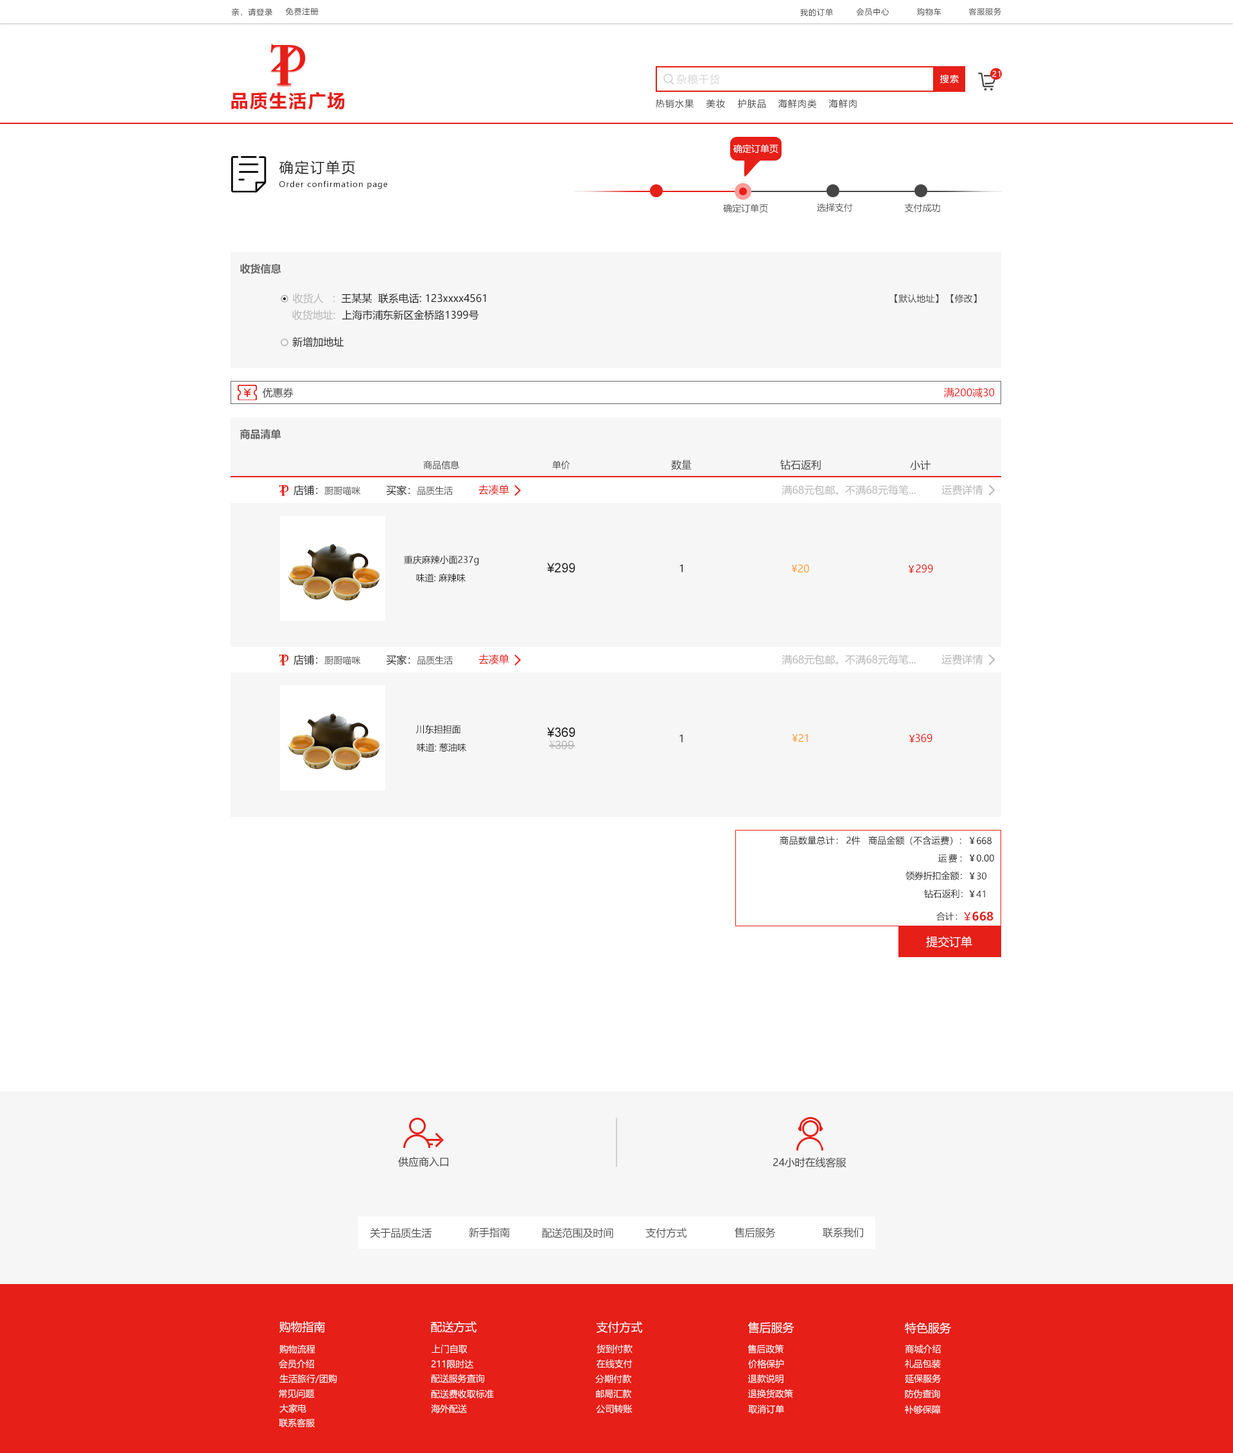
<style>
.page{position:relative;width:1233px;height:1453px;background:#ffffff}
.page>*{position:absolute;margin:0}
.t1{font:7.7px "MicrosoftYaHei";letter-spacing:0.08em;color:#404040}
.t2{font:10.3px "MicrosoftYaHei";letter-spacing:0.08em;color:#d6d6d6}
.t3{font:9px "MicrosoftYaHei";letter-spacing:0.08em;color:#ffffff}
.t4{font:7.7px "MicrosoftYaHei";letter-spacing:0.08em;color:#ffffff}
.t5{font:18px "MicrosoftYaHei-Bold";letter-spacing:0.08em;color:#e61f18}
.t6{font:9px "MicrosoftYaHei";letter-spacing:0.08em;color:#404040}
.t7{font:9px "MicrosoftYaHei";color:#ffffff}
.t8{font:14.1px "MicrosoftYaHei";letter-spacing:0.1em;color:#202020}
.t9{font:7.7px "MicrosoftYaHei";letter-spacing:0.1em;color:#202020}
.t10{font:9px "MicrosoftYaHei";color:#505050}
.t11{font:10.3px "MicrosoftYaHei-Bold";color:#666666}
.t12{font:10.3px "MicrosoftYaHei";color:#202020}
.t13{font:10.3px "MicrosoftYaHei";color:#b6b6b6}
.t14{font:9px "MicrosoftYaHei";color:#404040}
.t15{font:10.3px "MicrosoftYaHei";color:#404040}
.t16{font:10.3px "MicrosoftYaHei";color:#e61f18}
.t17{font:9px "MicrosoftYaHei";color:#202020}
.t18{font:12.8px "ArialMT";color:#202020}
.t19{font:10.3px "MicrosoftYaHei";color:#f99f36}
.t20{font:12.8px "ArialMT";color:#101010}
.t21{font:10.3px "MicrosoftYaHei";color:#101010}
.t22{font:10.4px "MicrosoftYaHei";color:#e61f18}
.t23{font:11.6px "ArialMT";color:#b6b6b6}
.t24{font:11.6px "SimSun";color:#b6b6b6}
.t25{font:9px "MicrosoftYaHei";color:#222222}
.t26{font:9px "MicrosoftYaHei";letter-spacing:0.02em;color:#222222}
.t27{font:8.9px "MicrosoftYaHei";letter-spacing:0.16em;color:#222222}
.t28{font:8.9px "MicrosoftYaHei";color:#222222}
.t29{font:11.6px "MicrosoftYaHei-Bold";color:#e61f18}
.t30{font:11.6px "MicrosoftYaHei";color:#fefbfb}
.t31{font:10.3px "MicrosoftYaHei";color:#505050}
.t32{font:11.6px "MicrosoftYaHei";color:#ffffff}
</style>
<div class="page">
<p class="t1" style="left:231px;top:8px;width:41px;height:8px">亲，请登录</p>
<p class="t1" style="left:285px;top:8px;width:34px;height:7px">免费注册</p>
<p class="t1" style="left:800px;top:8px;width:33px;height:8px">我的订单</p>
<p class="t1" style="left:856px;top:8px;width:33px;height:8px">会员中心</p>
<p class="t1" style="left:917px;top:8px;width:25px;height:8px">购物车</p>
<p class="t1" style="left:968px;top:8px;width:34px;height:7px">客服服务</p>
<p class="t2" style="left:676px;top:74px;width:44px;height:11px">杂粮干货</p>
<p class="t3" style="left:940px;top:74px;width:19px;height:9px">搜索</p>
<p class="t4" style="left:992px;top:71px;width:9px;height:6px">21</p>
<p class="t5" style="left:231px;top:92px;width:114px;height:18px">品质生活广场</p>
<p class="t6" style="left:656px;top:99px;width:38px;height:10px">热销水果</p>
<p class="t6" style="left:706px;top:99px;width:19px;height:9px">美妆</p>
<p class="t6" style="left:738px;top:99px;width:28px;height:10px">护肤品</p>
<p class="t6" style="left:778px;top:99px;width:39px;height:10px">海鲜肉类</p>
<p class="t6" style="left:828px;top:99px;width:29px;height:10px">海鲜肉</p>
<p class="t7" style="left:733px;top:144px;width:45px;height:9px">确定订单页</p>
<p class="t8" style="left:279px;top:161px;width:76px;height:14px">确定订单页</p>
<p class="t9" style="left:279px;top:180px;width:108px;height:9px">Order confirmation page</p>
<p class="t10" style="left:723px;top:204px;width:45px;height:9px">确定订单页</p>
<p class="t10" style="left:817px;top:203px;width:36px;height:9px">选择支付</p>
<p class="t10" style="left:904px;top:203px;width:36px;height:10px">支付成功</p>
<p class="t11" style="left:240px;top:263px;width:41px;height:11px">收货信息</p>
<p class="t12" style="left:293px;top:293px;width:193px;height:11px"><span class="t13">收货人   :  </span>王某某  联系电话: 123xxxx4561</p>
<p class="t14" style="left:895px;top:294px;width:44px;height:9px">【默认地址】</p>
<p class="t14" style="left:951px;top:294px;width:26px;height:9px">【修改】</p>
<p class="t12" style="left:292px;top:310px;width:187px;height:10px"><span class="t13">收货地址:  </span>上海市浦东新区金桥路1399号</p>
<p class="t12" style="left:292px;top:337px;width:52px;height:10px">新增加地址</p>
<p class="t15" style="left:263px;top:387px;width:31px;height:11px">优惠券</p>
<p class="t16" style="left:944px;top:387px;width:51px;height:11px">满200减30</p>
<p class="t11" style="left:240px;top:429px;width:41px;height:10px">商品清单</p>
<p class="t14" style="left:423px;top:460px;width:37px;height:9px">商品信息</p>
<p class="t14" style="left:552px;top:460px;width:18px;height:9px">单价</p>
<p class="t15" style="left:671px;top:460px;width:21px;height:10px">数量</p>
<p class="t15" style="left:780px;top:459px;width:41px;height:11px">钻石返利</p>
<p class="t15" style="left:910px;top:460px;width:21px;height:10px">小计</p>
<p class="t10" style="left:294px;top:485px;width:67px;height:10px"><span class="t12">店铺：</span>厨厨喵咪</p>
<p class="t10" style="left:386px;top:485px;width:67px;height:10px"><span class="t12">买家：</span>品质生活</p>
<p class="t16" style="left:478px;top:484px;width:31px;height:11px">去凑单</p>
<p class="t13" style="left:782px;top:485px;width:134px;height:10px">满68元包邮。不满68元每笔...</p>
<p class="t13" style="left:942px;top:484px;width:41px;height:11px">运费详情</p>
<p class="t17" style="left:404px;top:555px;width:75px;height:10px">重庆麻辣小面237g</p>
<p class="t18" style="left:547px;top:563px;width:28px;height:10px">¥299</p>
<p class="t12" style="left:679px;top:564px;width:4px;height:8px">1</p>
<p class="t19" style="left:791px;top:564px;width:18px;height:9px">¥20</p>
<p class="t16" style="left:916px;top:564px;width:17px;height:9px">299</p>
<p class="t17" style="left:416px;top:573px;width:50px;height:10px">味道: 麻辣味</p>
<p class="t16" style="left:478px;top:654px;width:31px;height:11px">去凑单</p>
<p class="t13" style="left:942px;top:654px;width:41px;height:11px">运费详情</p>
<p class="t10" style="left:294px;top:654px;width:67px;height:11px"><span class="t12">店铺：</span>厨厨喵咪</p>
<p class="t10" style="left:386px;top:654px;width:67px;height:11px"><span class="t12">买家：</span>品质生活</p>
<p class="t13" style="left:782px;top:654px;width:134px;height:11px">满68元包邮。不满68元每笔...</p>
<p class="t17" style="left:416px;top:724px;width:45px;height:9px">川东担担面</p>
<p class="t20" style="left:547px;top:727px;width:28px;height:10px">¥369</p>
<p class="t21" style="left:679px;top:734px;width:4px;height:8px">1</p>
<p class="t19" style="left:793px;top:733px;width:15px;height:9px">¥21</p>
<p class="t22" style="left:915px;top:733px;width:18px;height:9px">369</p>
<p class="t17" style="left:417px;top:742px;width:49px;height:10px">味道: 葱油味</p>
<p class="t23" style="left:549px;top:740px;width:25px;height:9px"><span class="t24">¥</span>399</p>
<p class="t25" style="left:780px;top:836px;width:181px;height:9px"><span class="t26">商品数量总计</span>： 2件   商品金额（不含运费）：</p>
<p class="t25" style="left:977px;top:837px;width:15px;height:8px">668</p>
<p class="t27" style="left:938px;top:854px;width:24px;height:9px">运费<span class="t28">：</span></p>
<p class="t25" style="left:976px;top:854px;width:18px;height:8px">0.00</p>
<p class="t28" style="left:906px;top:871px;width:56px;height:10px">领券折扣金额：</p>
<p class="t28" style="left:977px;top:872px;width:9px;height:8px">30</p>
<p class="t28" style="left:924px;top:889px;width:39px;height:9px">钻石返利：</p>
<p class="t28" style="left:976px;top:890px;width:9px;height:7px">41</p>
<p class="t28" style="left:936px;top:912px;width:22px;height:9px">合计：</p>
<p class="t29" style="left:972px;top:911px;width:22px;height:10px">668</p>
<p class="t30" style="left:926px;top:936px;width:46px;height:11px">提交订单</p>
<p class="t15" style="left:398px;top:1156px;width:50px;height:11px">供应商入口</p>
<p class="t15" style="left:773px;top:1157px;width:73px;height:11px">24小时在线客服</p>
<p class="t31" style="left:370px;top:1227px;width:62px;height:11px">关于品质生活</p>
<p class="t31" style="left:469px;top:1227px;width:41px;height:11px">新手指南</p>
<p class="t31" style="left:542px;top:1227px;width:71px;height:11px">配送范围及时间</p>
<p class="t31" style="left:645px;top:1227px;width:42px;height:11px">支付方式</p>
<p class="t31" style="left:735px;top:1227px;width:41px;height:11px">售后服务</p>
<p class="t31" style="left:823px;top:1227px;width:40px;height:11px">联系我们</p>
<p class="t32" style="left:279px;top:1321px;width:46px;height:12px">购物指南</p>
<p class="t32" style="left:431px;top:1321px;width:46px;height:12px">配送方式</p>
<p class="t32" style="left:597px;top:1321px;width:46px;height:12px">支付方式</p>
<p class="t32" style="left:748px;top:1321px;width:46px;height:12px">售后服务</p>
<p class="t32" style="left:905px;top:1322px;width:46px;height:12px">特色服务</p>
<p class="t7" style="left:279px;top:1344px;width:36px;height:9px">购物流程</p>
<p class="t7" style="left:432px;top:1344px;width:36px;height:9px">上门自取</p>
<p class="t7" style="left:597px;top:1344px;width:36px;height:9px">货到付款</p>
<p class="t7" style="left:748px;top:1344px;width:36px;height:9px">售后政策</p>
<p class="t7" style="left:905px;top:1344px;width:36px;height:9px">商城介绍</p>
<p class="t7" style="left:279px;top:1359px;width:35px;height:10px">会员介绍</p>
<p class="t7" style="left:431px;top:1359px;width:43px;height:10px">211限时达</p>
<p class="t7" style="left:597px;top:1359px;width:36px;height:9px">在线支付</p>
<p class="t7" style="left:748px;top:1359px;width:36px;height:10px">价格保护</p>
<p class="t7" style="left:905px;top:1359px;width:36px;height:9px">礼品包装</p>
<p class="t7" style="left:279px;top:1374px;width:58px;height:9px">生活旅行/团购</p>
<p class="t7" style="left:431px;top:1374px;width:53px;height:9px">配送服务查询</p>
<p class="t7" style="left:595px;top:1374px;width:36px;height:9px">分期付款</p>
<p class="t7" style="left:748px;top:1374px;width:36px;height:9px">退款说明</p>
<p class="t7" style="left:905px;top:1374px;width:37px;height:9px">延保服务</p>
<p class="t7" style="left:279px;top:1389px;width:36px;height:9px">常见问题</p>
<p class="t7" style="left:431px;top:1389px;width:63px;height:9px">配送费收取标准</p>
<p class="t7" style="left:596px;top:1389px;width:35px;height:9px">邮局汇款</p>
<p class="t7" style="left:748px;top:1389px;width:45px;height:9px">退换货政策</p>
<p class="t7" style="left:905px;top:1389px;width:35px;height:9px">防伪查询</p>
<p class="t7" style="left:279px;top:1403px;width:27px;height:10px">大家电</p>
<p class="t7" style="left:431px;top:1404px;width:36px;height:9px">海外配送</p>
<p class="t7" style="left:596px;top:1404px;width:37px;height:10px">公司转账</p>
<p class="t7" style="left:748px;top:1405px;width:36px;height:9px">取消订单</p>
<p class="t7" style="left:905px;top:1405px;width:36px;height:9px">补够保障</p>
<p class="t7" style="left:279px;top:1418px;width:36px;height:9px">联系客服</p>
</div>
